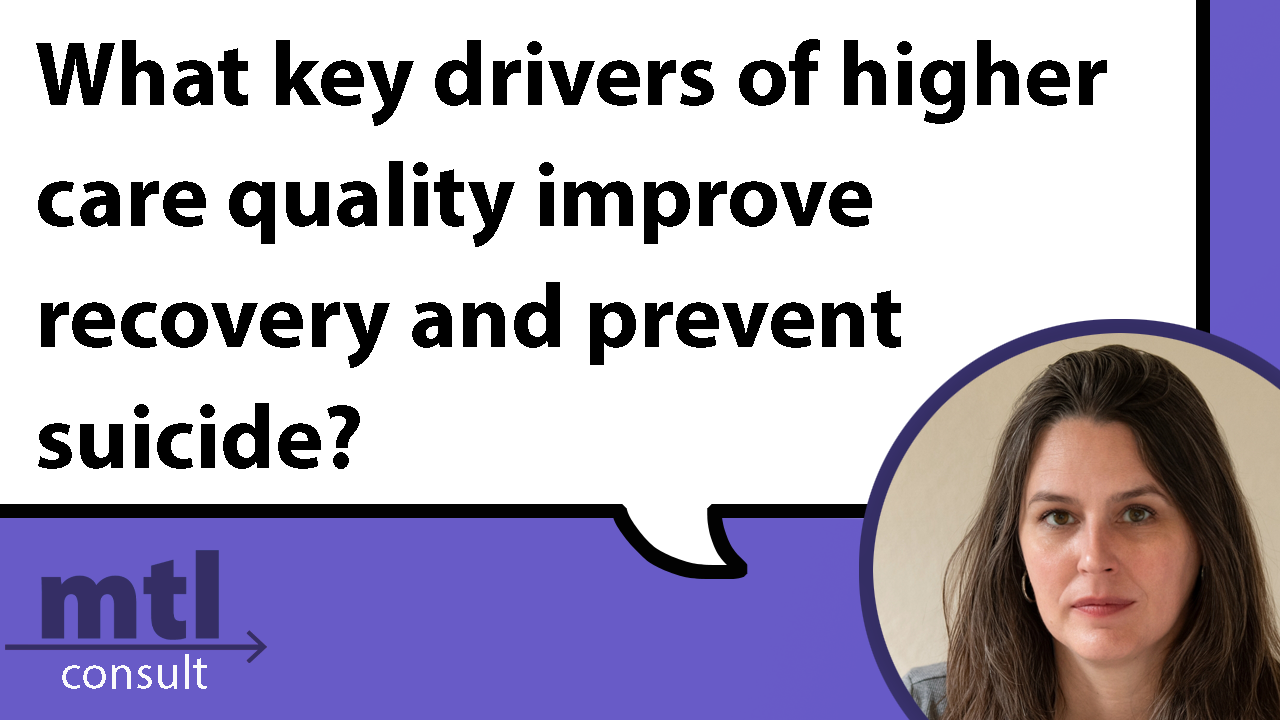
<style>
.page{position:relative;width:1280px;height:720px;background:#ffffff}
.page>*{position:absolute;margin:0}
.t1{font:91.7px "MyriadPro-Bold";color:#000000}
</style>
<div class="page">
<p class="t1" style="left:36px;top:39px;width:1071px;height:430px">What key drivers of higher<br>care quality improve <br>recovery and prevent <br>suicide?</p>
</div>
